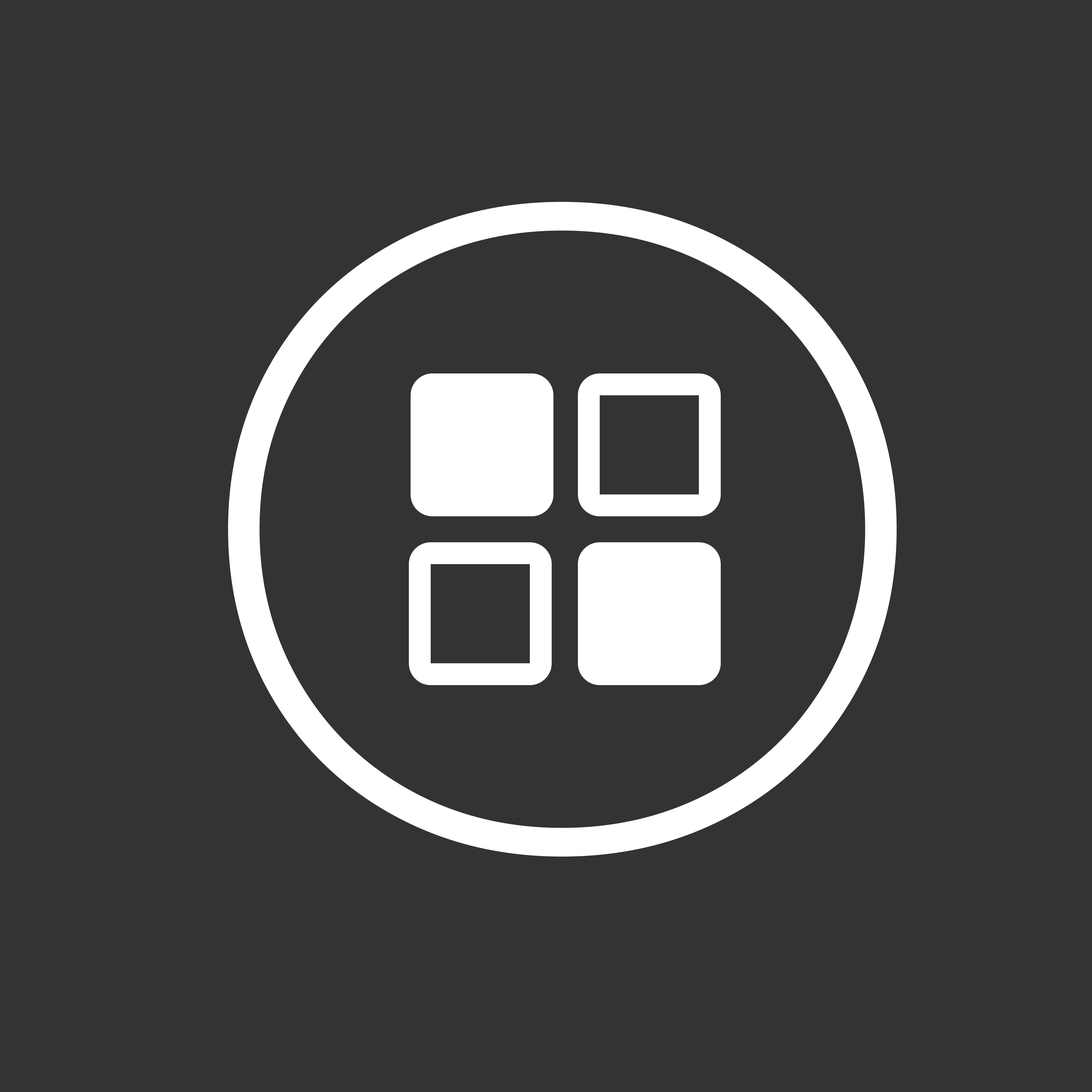
<style>
.page{position:relative;width:1092px;height:1092px;background:#333333}
.page>*{position:absolute;margin:0}
.t1{font:924.7px "Montserrat-ExtraLight";letter-spacing:0.1em;color:#ffffff}
</style>
<div class="page">
<p class="t1" style="left:228px;top:202px;width:669px;height:655px">O</p>
</div>
